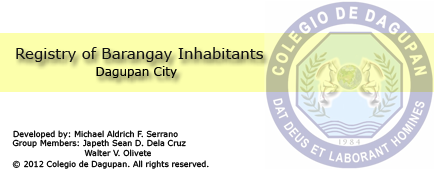
<style>
.page{position:relative;width:434px;height:170px;background:#ffffff}
.page>*{position:absolute;margin:0}
.t1{font:15px "Verdana";color:#111111}
.t2{font:12px "Verdana";color:#000000}
.t3{font:8px "Verdana";color:#000000}
</style>
<div class="page">
<p class="t1" style="left:16px;top:47px;width:247px;height:15px">Registry of Barangay Inhabitants</p>
<p class="t2" style="left:96px;top:66px;width:81px;height:12px">Dagupan City</p>
<p class="t3" style="left:13px;top:130px;width:165px;height:9px">Developed by: Michael Aldrich F. Serrano</p>
<p class="t3" style="left:12px;top:139px;width:174px;height:18px">Group Members: Japeth Sean D. Dela Cruz<br>  Walter V. Olivete</p>
<p class="t3" style="left:12px;top:160px;width:197px;height:9px">© 2012 Colegio de Dagupan. All rights reserved.</p>
</div>
